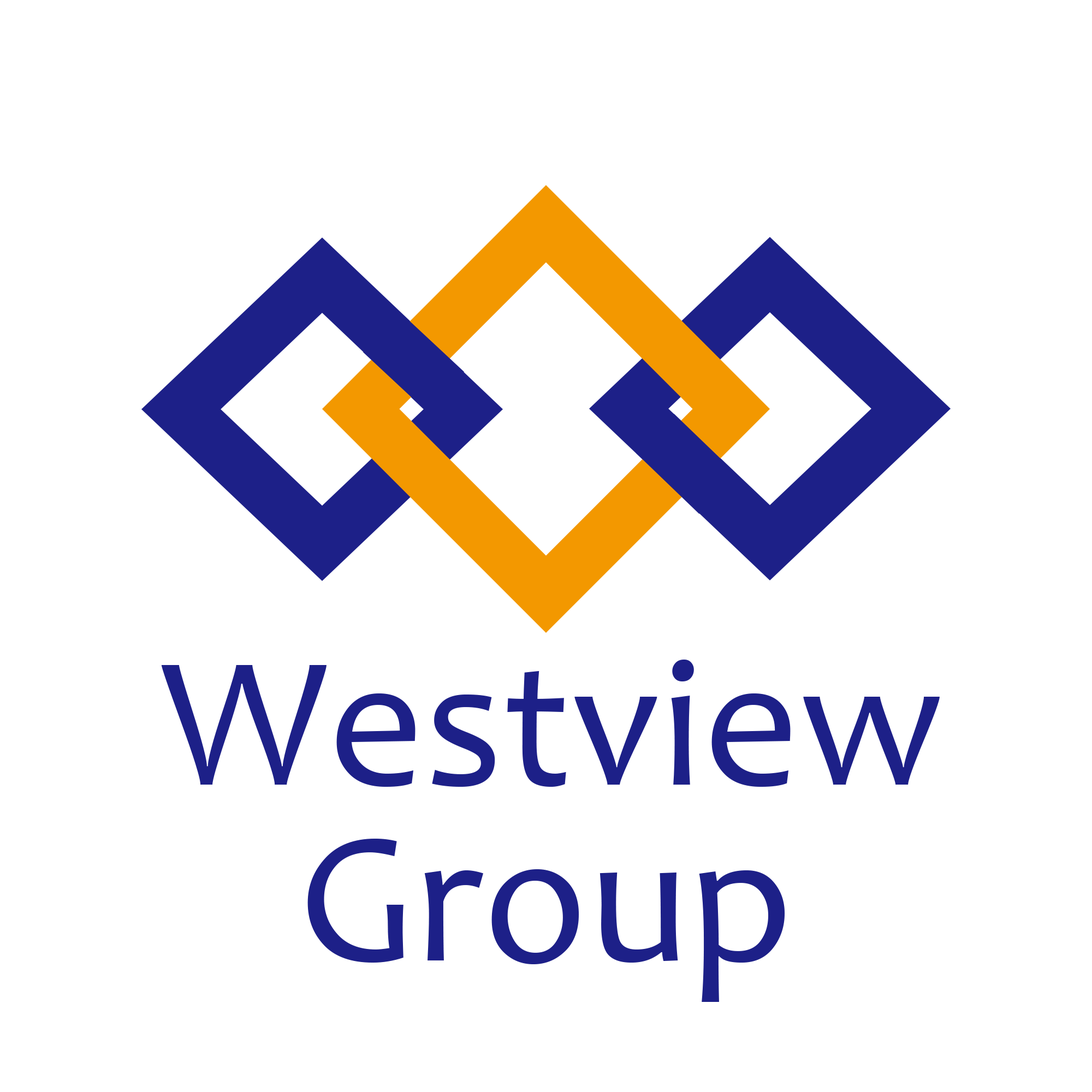
<style>
.page{position:relative;width:1092px;height:1092px;background:#ffffff}
.page>*{position:absolute;margin:0}
.t1{font:188.5px "Candara";color:#1d2088}
</style>
<div class="page">
<p class="t1" style="left:161px;top:660px;width:779px;height:127px">Westview</p>
<p class="t1" style="left:307px;top:839px;width:478px;height:163px">Group</p>
</div>
